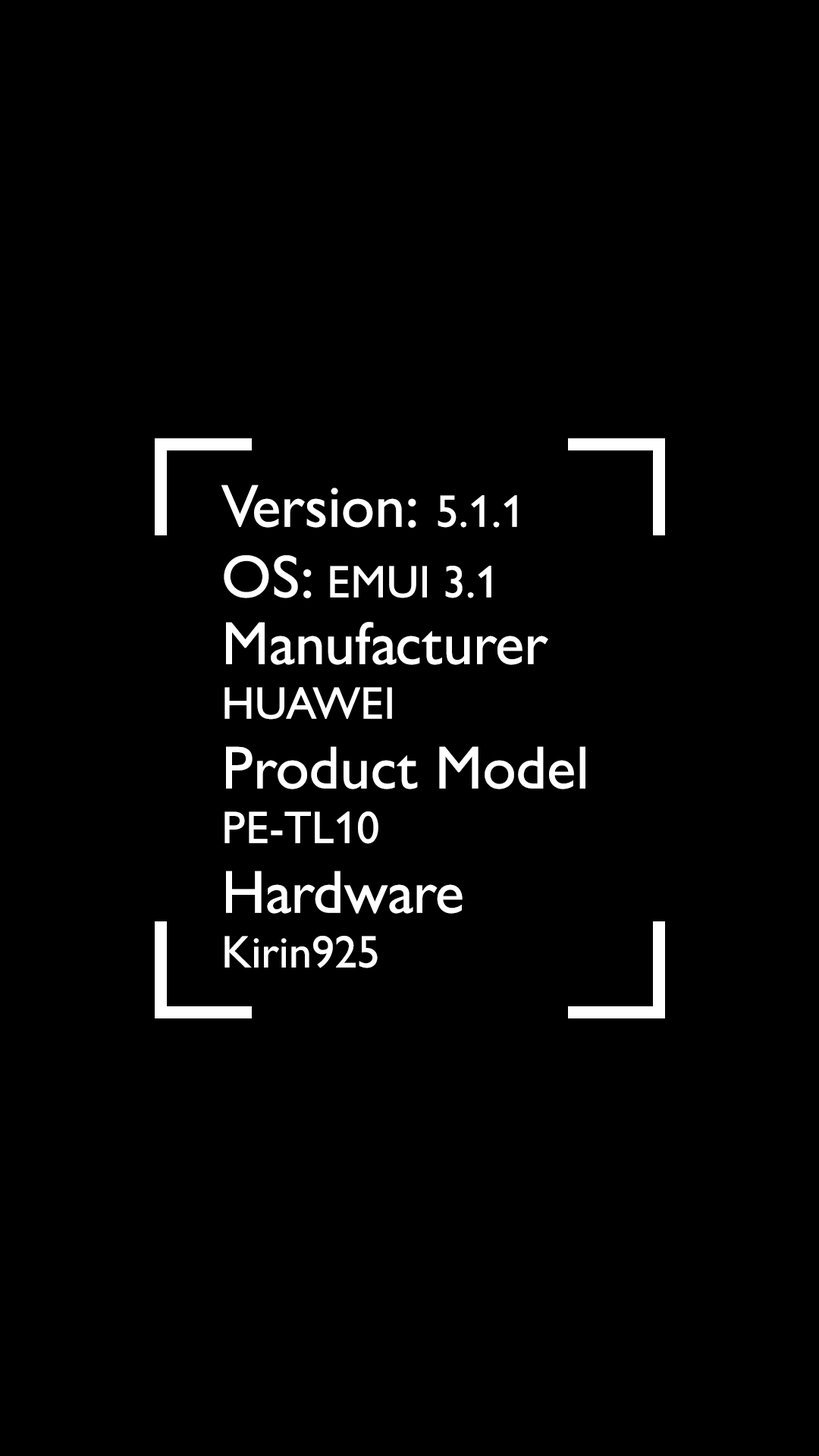
<style>
.page{position:relative;width:819px;height:1456px;background:#000000}
.page>*{position:absolute;margin:0}
.t1{font:60.7px "GillSansNova";color:#ffffff}
.t2{font:45.5px "GillSansNova";color:#ffffff}
</style>
<div class="page">
<p class="t1" style="left:221px;top:485px;width:296px;height:43px">Version: <span class="t2">5.1.1</span></p>
<p class="t2" style="left:224px;top:555px;width:267px;height:43px"><span class="t1">OS:</span> EMUI 3.1</p>
<p class="t1" style="left:224px;top:622px;width:324px;height:98px">Manufacturer<br><span class="t2">HUAWEI</span></p>
<p class="t1" style="left:224px;top:746px;width:361px;height:98px">Product Model<br><span class="t2">PE-TL10</span></p>
<p class="t1" style="left:224px;top:871px;width:239px;height:97px">Hardware<br><span class="t2">Kirin925</span></p>
</div>
